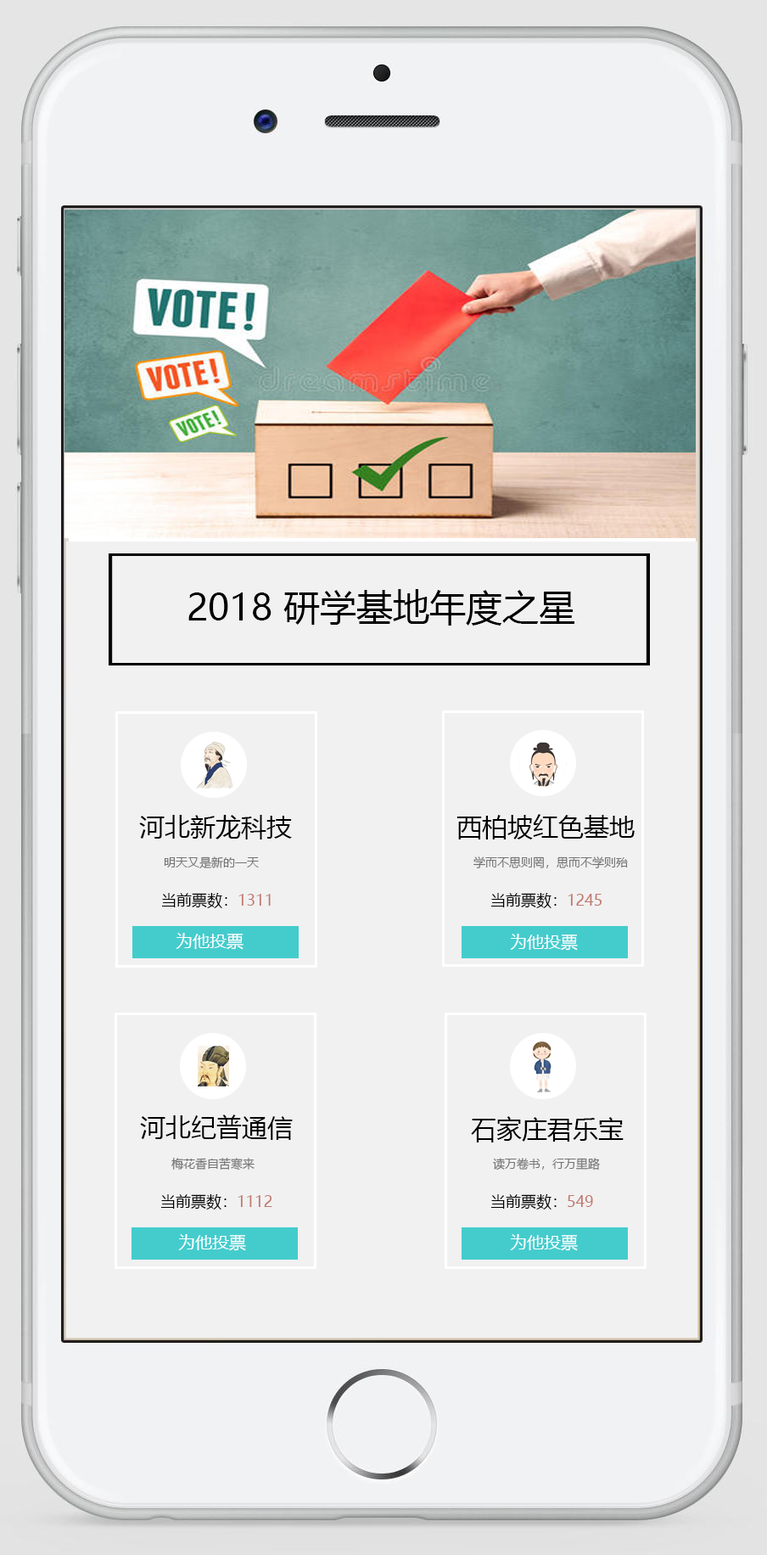
<style>
.page{position:relative;width:767px;height:1555px;background:#f1f1f1}
.page>*{position:absolute;margin:0}
.t1{font:36.5px "MicrosoftYaHei";color:#000000}
.t2{font:25.5px "MicrosoftYaHei";color:#000000}
.t3{font:11.9px "MicrosoftYaHei";color:#747474}
.t4{font:15.3px "MicrosoftYaHei";color:#000000}
.t5{font:15.3px "MicrosoftYaHei";color:#c27a70}
.t6{font:17px "MicrosoftYaHei";color:#ffffff}
</style>
<div class="page">
<p class="t1" style="left:188px;top:589px;width:386px;height:36px">2018 研学基地年度之星</p>
<p class="t2" style="left:139px;top:815px;width:153px;height:24px">河北新龙科技</p>
<p class="t2" style="left:457px;top:814px;width:178px;height:25px">西柏坡红色基地</p>
<p class="t3" style="left:164px;top:856px;width:95px;height:12px">明天又是新的一天</p>
<p class="t3" style="left:473px;top:856px;width:155px;height:12px">学而不思则罔，思而不学则殆</p>
<p class="t4" style="left:161px;top:893px;width:110px;height:15px">当前票数：<span class="t5">1311</span></p>
<p class="t4" style="left:490px;top:893px;width:112px;height:15px">当前票数：<span class="t5">1245</span></p>
<p class="t6" style="left:176px;top:933px;width:68px;height:17px">为他投票</p>
<p class="t6" style="left:510px;top:933px;width:68px;height:17px">为他投票</p>
<p class="t2" style="left:140px;top:1114px;width:153px;height:26px">河北纪普通信</p>
<p class="t2" style="left:471px;top:1116px;width:153px;height:26px">石家庄君乐宝</p>
<p class="t3" style="left:171px;top:1157px;width:84px;height:13px">梅花香自苦寒来</p>
<p class="t3" style="left:493px;top:1157px;width:107px;height:13px">读万卷书，行万里路</p>
<p class="t4" style="left:160px;top:1194px;width:112px;height:15px">当前票数：<span class="t5">1112</span></p>
<p class="t4" style="left:490px;top:1194px;width:103px;height:15px">当前票数：<span class="t5">549</span></p>
<p class="t6" style="left:178px;top:1234px;width:68px;height:17px">为他投票</p>
<p class="t6" style="left:510px;top:1234px;width:68px;height:17px">为他投票</p>
</div>
